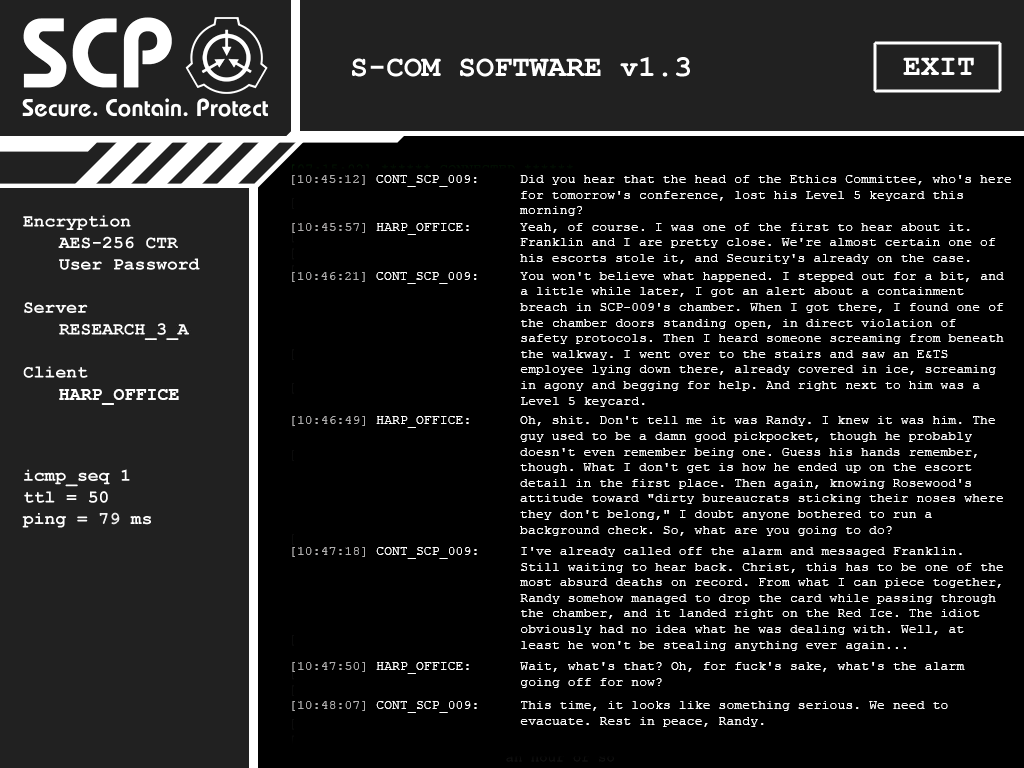
<style>
.page{position:relative;width:1024px;height:768px;background:#000000}
.page>*{position:absolute;margin:0}
.t1{font:13px "CourierNewPSMT";letter-spacing:0.01em;color:#ffffff}
.t2{font:13px "CourierNewPSMT";letter-spacing:0.01em;color:#aeacac}
.t3{font:13px "CourierNewPSMT";letter-spacing:0.01em;color:#afaeae}
.t4{font:18px "CourierNewPS-BoldMT";letter-spacing:0.01em;color:#ffffff;text-transform:uppercase}
.t5{font:13px "CourierNewPSMT";letter-spacing:0.01em;color:#b1b0b0}
</style>
<div class="page">
<p class="t1" style="left:292px;top:175px;width:185px;height:12px"><span class="t2">[10:45:12]</span> CONT_SCP_009:</p>
<p class="t1" style="left:520px;top:175px;width:491px;height:41px">Did you hear that the head of the Ethics Committee, who's here for tomorrow's conference, lost his Level 5 keycard this morning?</p>
<p class="t1" style="left:292px;top:223px;width:177px;height:12px"><span class="t2">[10:45:57]</span> HARP_OFFICE:</p>
<p class="t1" style="left:520px;top:223px;width:476px;height:41px">Yeah, of course. I was one of the first to hear about it. Franklin and I are pretty close. We're almost certain one of his escorts stole it, and Security's already on the case.</p>
<p class="t1" style="left:292px;top:272px;width:185px;height:12px"><span class="t3">[10:46:21]</span> CONT_SCP_009:</p>
<p class="t1" style="left:520px;top:272px;width:484px;height:135px">You won't believe what happened. I stepped out for a bit, and a little while later, I got an alert about a containment breach in SCP-009's chamber. When I got there, I found one of the chamber doors standing open, in direct violation of safety protocols. Then I heard someone screaming from beneath the walkway. I went over to the stairs and saw an E&amp;TS employee lying down there, already covered in ice, screaming in agony and begging for help. And right next to him was a Level 5 keycard.</p>
<p class="t4" style="left:59px;top:389px;width:120px;height:16px">HARP_OFFICE</p>
<p class="t1" style="left:292px;top:416px;width:177px;height:12px"><span class="t3">[10:46:49]</span> HARP_OFFICE:</p>
<p class="t1" style="left:520px;top:416px;width:483px;height:120px">Oh, shit. Don't tell me it was Randy. I knew it was him. The guy used to be a damn good pickpocket, though he probably doesn't even remember being one. Guess his hands remember, though. What I don't get is how he ended up on the escort detail in the first place. Then again, knowing Rosewood's attitude toward "dirty bureaucrats sticking their noses where they don't belong," I doubt anyone bothered to run a background check. So, what are you going to do?</p>
<p class="t1" style="left:292px;top:547px;width:185px;height:12px"><span class="t5">[10:47:18]</span> CONT_SCP_009:</p>
<p class="t1" style="left:520px;top:547px;width:483px;height:104px">I've already called off the alarm and messaged Franklin. Still waiting to hear back. Christ, this has to be one of the most absurd deaths on record. From what I can piece together, Randy somehow managed to drop the card while passing through the chamber, and it landed right on the Red Ice. The idiot obviously had no idea what he was dealing with. Well, at least he won't be stealing anything ever again...</p>
<p class="t1" style="left:292px;top:662px;width:177px;height:12px"><span class="t3">[10:47:50]</span> HARP_OFFICE:</p>
<p class="t1" style="left:520px;top:662px;width:445px;height:26px">Wait, what's that? Oh, for fuck's sake, what's the alarm going off for now?</p>
<p class="t1" style="left:292px;top:701px;width:185px;height:12px"><span class="t5">[10:48:07]</span> CONT_SCP_009:</p>
<p class="t1" style="left:520px;top:701px;width:428px;height:26px">This time, it looks like something serious. We need to evacuate. Rest in peace, Randy.</p>
</div>
